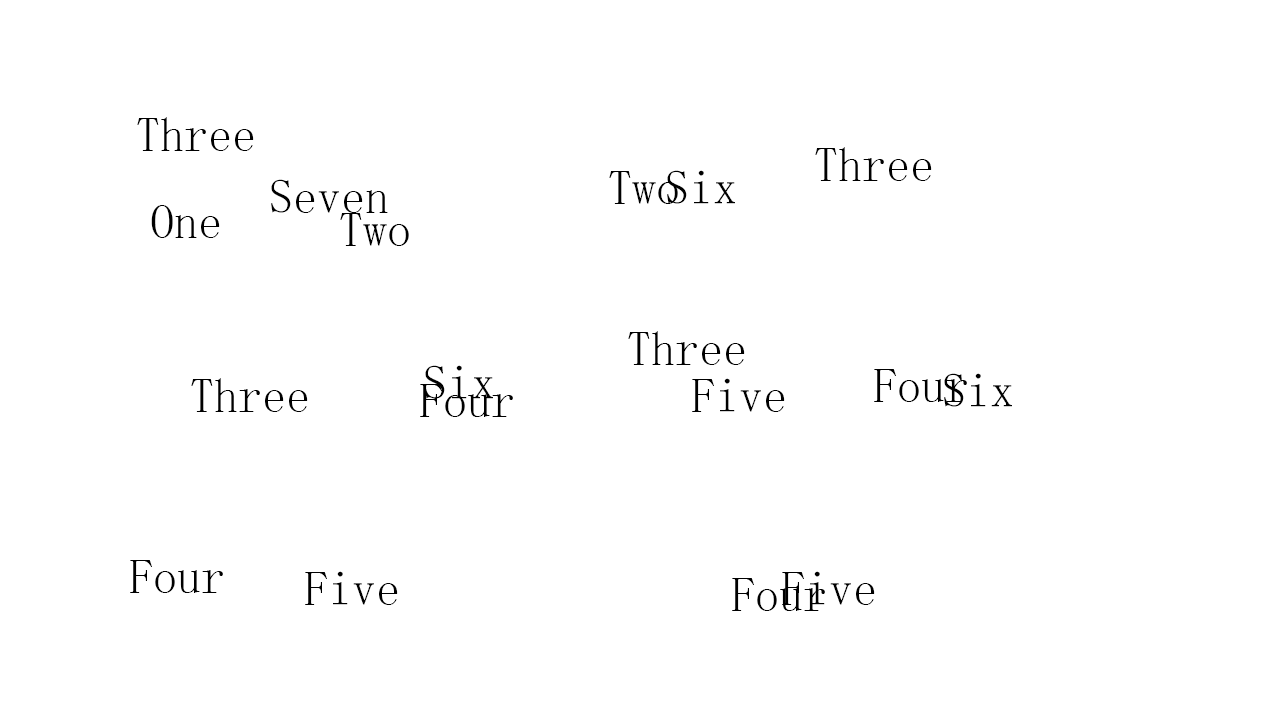
<style>
.page{position:relative;width:1280px;height:720px;background:#ffffff}
.page>*{position:absolute;margin:0}
.t1{font:48px "SimSun";color:#000000}
</style>
<div class="page">
<p class="t1" style="left:137px;top:117px;width:117px;height:34px">Three</p>
<p class="t1" style="left:815px;top:147px;width:117px;height:34px">Three</p>
<p class="t1" style="left:609px;top:171px;width:69px;height:33px">Two</p>
<p class="t1" style="left:667px;top:170px;width:68px;height:34px">Six</p>
<p class="t1" style="left:271px;top:179px;width:117px;height:34px">Seven</p>
<p class="t1" style="left:151px;top:205px;width:69px;height:33px">One</p>
<p class="t1" style="left:340px;top:213px;width:69px;height:33px">Two</p>
<p class="t1" style="left:628px;top:331px;width:117px;height:34px">Three</p>
<p class="t1" style="left:425px;top:365px;width:68px;height:34px">Six</p>
<p class="t1" style="left:874px;top:369px;width:93px;height:33px">Four</p>
<p class="t1" style="left:944px;top:373px;width:68px;height:34px">Six</p>
<p class="t1" style="left:191px;top:378px;width:117px;height:34px">Three</p>
<p class="t1" style="left:420px;top:384px;width:93px;height:33px">Four</p>
<p class="t1" style="left:692px;top:378px;width:93px;height:34px">Five</p>
<p class="t1" style="left:130px;top:560px;width:93px;height:33px">Four</p>
<p class="t1" style="left:305px;top:571px;width:93px;height:34px">Five</p>
<p class="t1" style="left:732px;top:578px;width:93px;height:33px">Four</p>
<p class="t1" style="left:782px;top:571px;width:93px;height:34px">Five</p>
</div>
